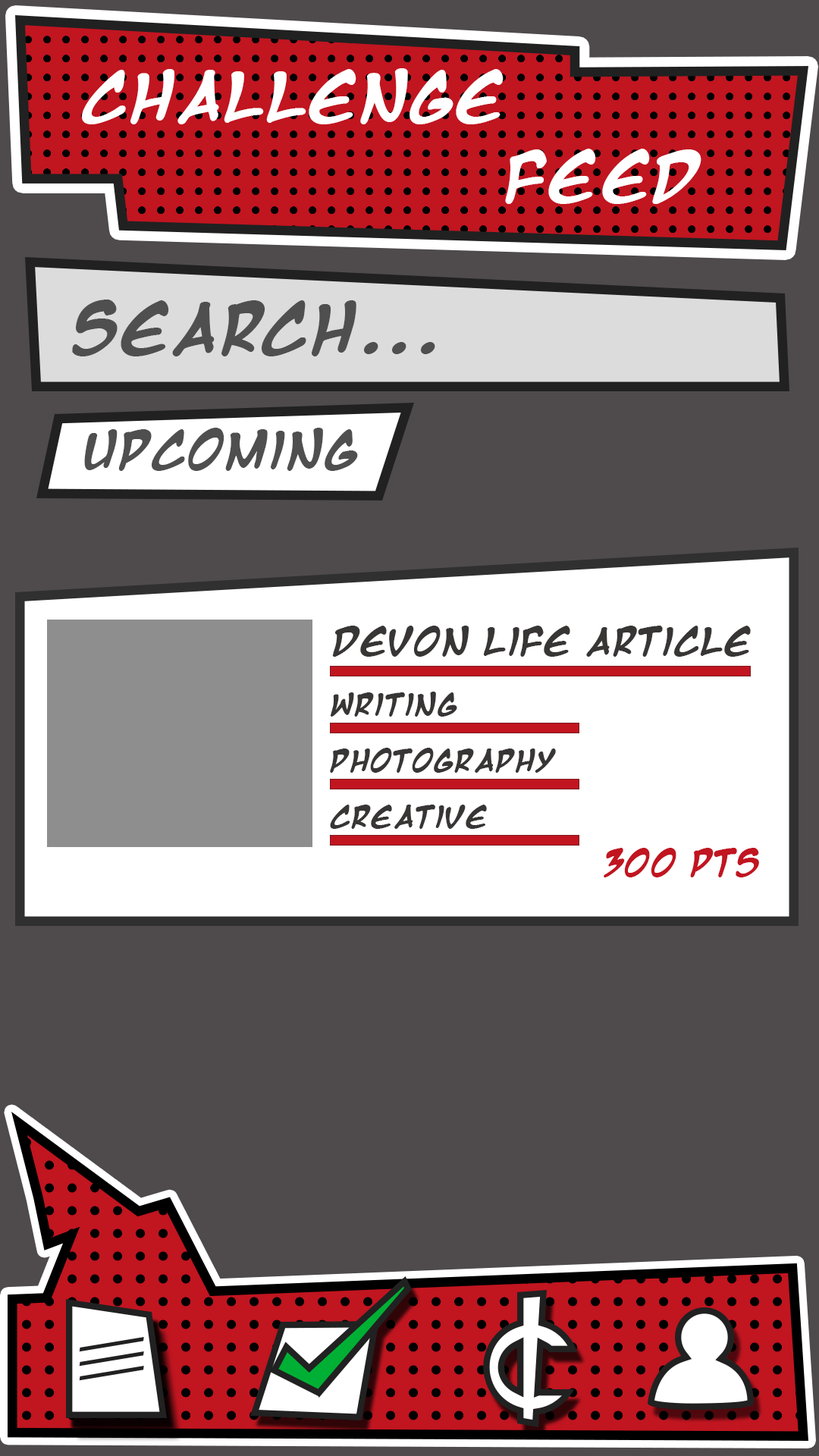
<style>
.page{position:relative;width:819px;height:1456px;background:#4f4b4c}
.page>*{position:absolute;margin:0}
.t1{font:57.1px "MangaTempleBold";color:#ffffff}
.t2{font:58.4px "MangaTempleBold";color:#4f4f4f}
.t3{font:43.4px "MangaTempleBold";color:#4f4f4f}
.t4{font:31.6px "MangaTempleBold";color:#383535}
.t5{font:25.3px "MangaTempleBold";color:#383535}
.t6{font:29.8px "MangaTempleBold";color:#c11520}
</style>
<div class="page">
<p class="t1" style="left:82px;top:68px;width:422px;height:56px">CHallenge</p>
<p class="t1" style="left:505px;top:149px;width:196px;height:55px">Feed</p>
<p class="t2" style="left:72px;top:300px;width:363px;height:56px">Search...</p>
<p class="t3" style="left:84px;top:428px;width:274px;height:43px">Upcoming</p>
<p class="t4" style="left:332px;top:626px;width:419px;height:31px">Devon Life Article</p>
<p class="t5" style="left:331px;top:692px;width:126px;height:25px">Writing</p>
<p class="t5" style="left:330px;top:748px;width:226px;height:25px">PHotography</p>
<p class="t5" style="left:330px;top:805px;width:157px;height:24px">Creative</p>
<p class="t6" style="left:604px;top:848px;width:155px;height:29px">300 pts</p>
</div>
